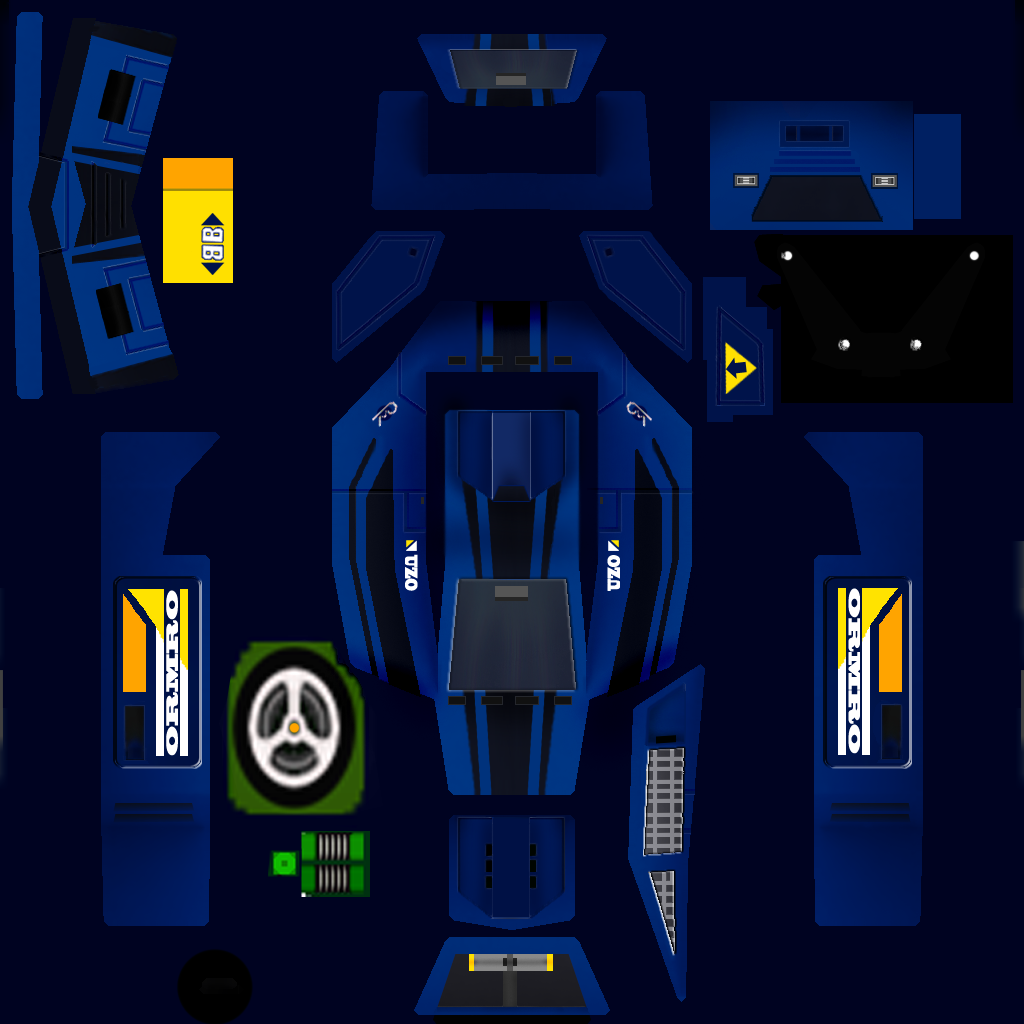
<style>
.page{position:relative;width:1024px;height:1024px;background:#000321}
.page>*{position:absolute;margin:0}
.t1{font:16.3px "BlackoakStd";color:#ffffff;scale:0.42 1}
.t2{font:15.4px "BlackoakStd";color:#ffffff;scale:1.1 1}
</style>
<div class="page">
<p class="t1" style="left:405px;top:554px;width:13px;height:37px;rotate:90deg">UZO</p>
<p class="t1" style="left:607px;top:555px;width:13px;height:36px;rotate:-90deg">UZO</p>
<p class="t2" style="left:166px;top:590px;width:12px;height:166px;rotate:-90deg">ORMRO</p>
</div>
